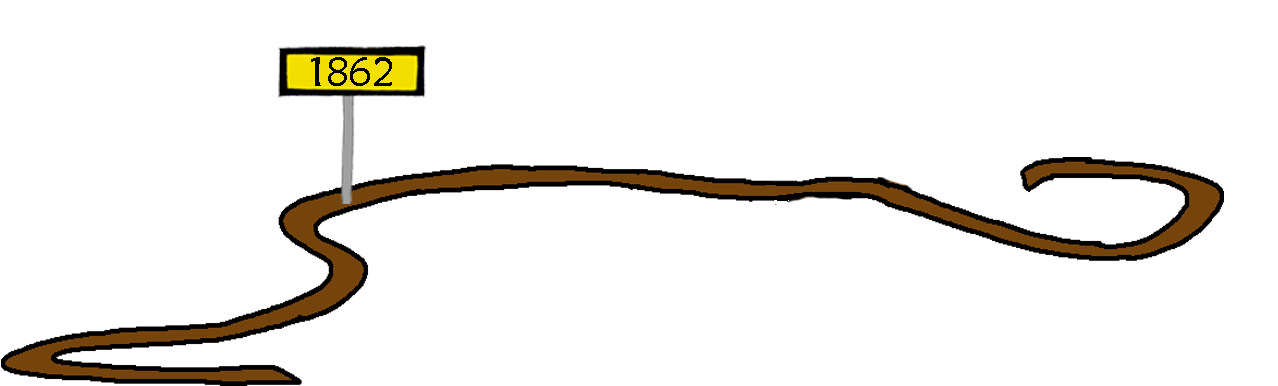
<style>
.page{position:relative;width:1278px;height:386px;background:#ffffff}
.page>*{position:absolute;margin:0}
.t1{font:41.7px "MaiandraGD-Regular";color:#000000}
</style>
<div class="page">
<p class="t1" style="left:311px;top:57px;width:81px;height:29px">1862</p>
</div>
